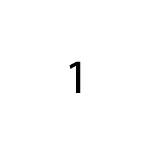
<style>
.page{position:relative;width:150px;height:150px;background:#ffffff}
.page>*{position:absolute;margin:0}
.t1{font:48px "MyriadPro-Regular";color:#000000}
</style>
<div class="page">
<p class="t1" style="left:69px;top:61px;width:12px;height:32px">1</p>
</div>
